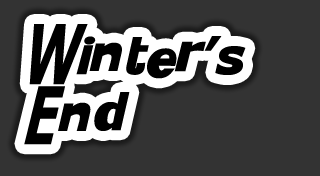
<style>
.page{position:relative;width:320px;height:176px;background:#333333}
.page>*{position:absolute;margin:0}
.t1{font:50px "KittyKatt";color:#000000}
</style>
<div class="page">
<p class="t1" style="left:24px;top:24px;width:222px;height:121px">Winter’s End</p>
</div>
